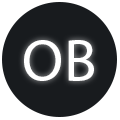
<style>
.page{position:relative;width:120px;height:120px;background:#181b1e}
.page>*{position:absolute;margin:0}
.t1{font:60px "MyriadPro-Regular";color:#ffffff}
</style>
<div class="page">
<p class="t1" style="left:24px;top:40px;width:70px;height:41px">OB</p>
</div>
